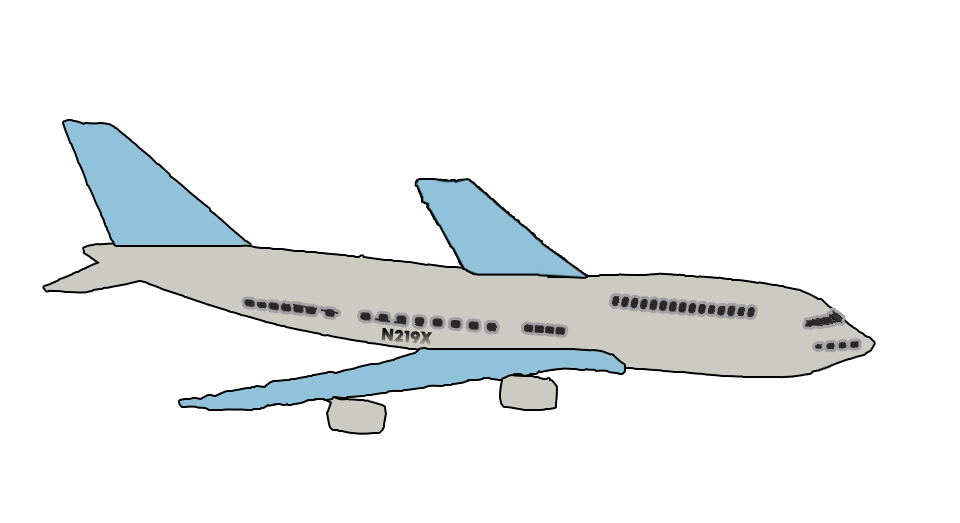
<style>
.page{position:relative;width:960px;height:523px;background:#ffffff}
.page>*{position:absolute;margin:0}
.t1{font:17.2px "Mont-HeavyDEMO"}
</style>
<div class="page">
<p class="t1" style="left:381px;top:328px;width:52px;height:17px;rotate:5deg">N219X</p>
</div>
